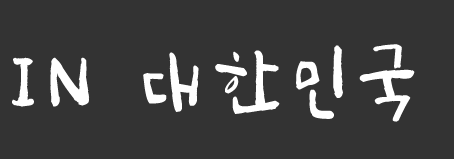
<style>
.page{position:relative;width:454px;height:159px;background:#333333}
.page>*{position:absolute;margin:0}
.t1{font:72px "SangSangFlowerRoad";letter-spacing:0.2em;color:#ffffff;text-transform:uppercase}
</style>
<div class="page">
<p class="t1" style="left:12px;top:44px;width:403px;height:78px">iN 대한민국</p>
</div>
